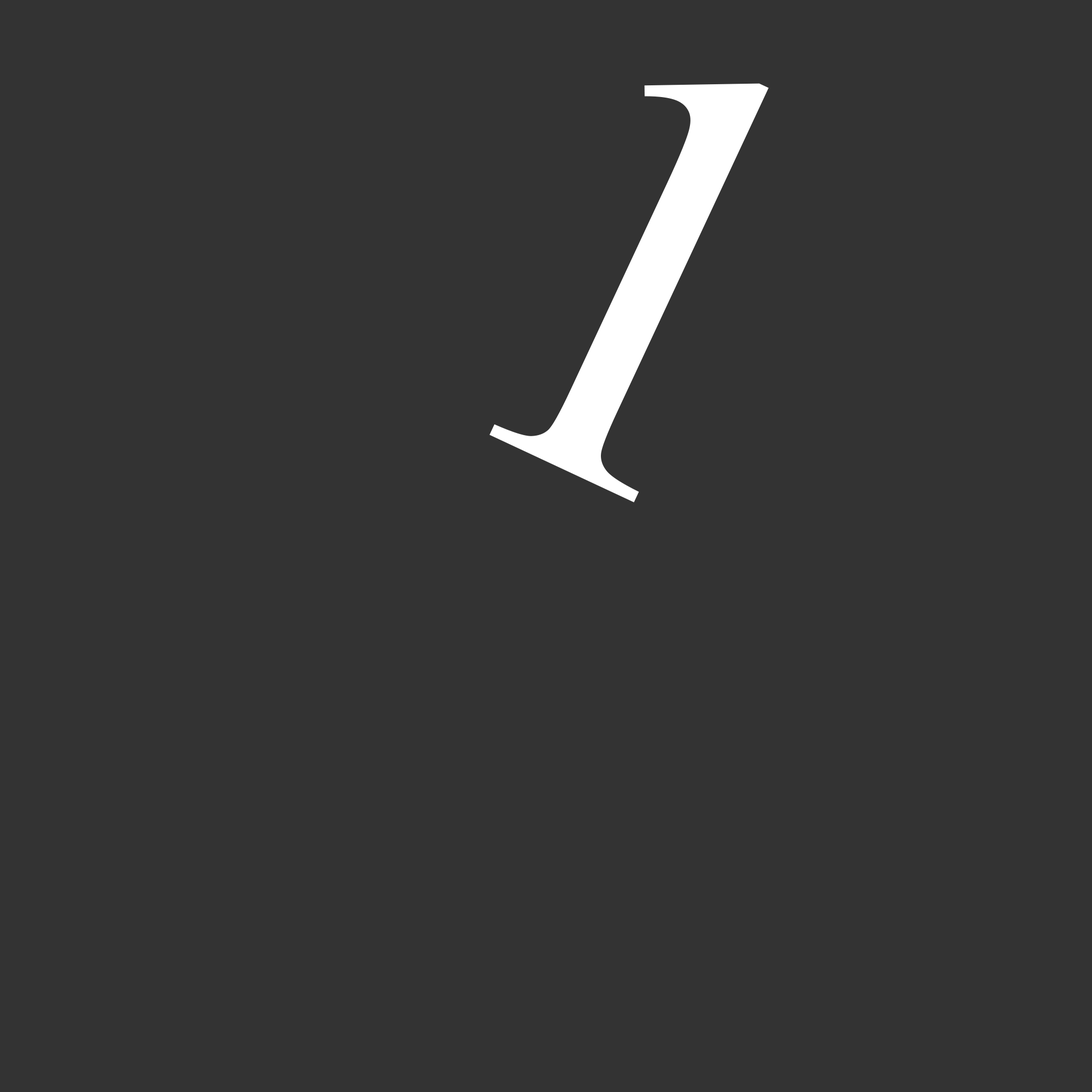
<style>
.page{position:relative;width:1092px;height:1092px;background:#333333}
.page>*{position:absolute;margin:0}
.t1{font:639.8px "TimesNewRomanPSMT";color:#ffffff}
</style>
<div class="page">
<p class="t1" style="left:489px;top:83px;width:280px;height:419px;rotate:25deg">1</p>
</div>
